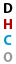
<style>
.page{position:relative;width:16px;height:64px;background:#ffffff}
.page>*{position:absolute;margin:0}
.t1{font:14px "MyriadPro-Bold";letter-spacing:-0.05em;color:#000000}
.t2{font:14px "MyriadPro-Bold";letter-spacing:-0.05em;color:#b40202}
.t3{font:14px "MyriadPro-Bold";letter-spacing:-0.05em;color:#0099cc}
.t4{font:14px "MyriadPro-Bold";letter-spacing:-0.05em;color:#999999}
</style>
<div class="page">
<p class="t1" style="left:4px;top:3px;width:9px;height:10px">D</p>
<p class="t2" style="left:4px;top:19px;width:8px;height:10px">H</p>
<p class="t3" style="left:4px;top:35px;width:8px;height:10px">C</p>
<p class="t4" style="left:3px;top:52px;width:10px;height:10px">O</p>
</div>
